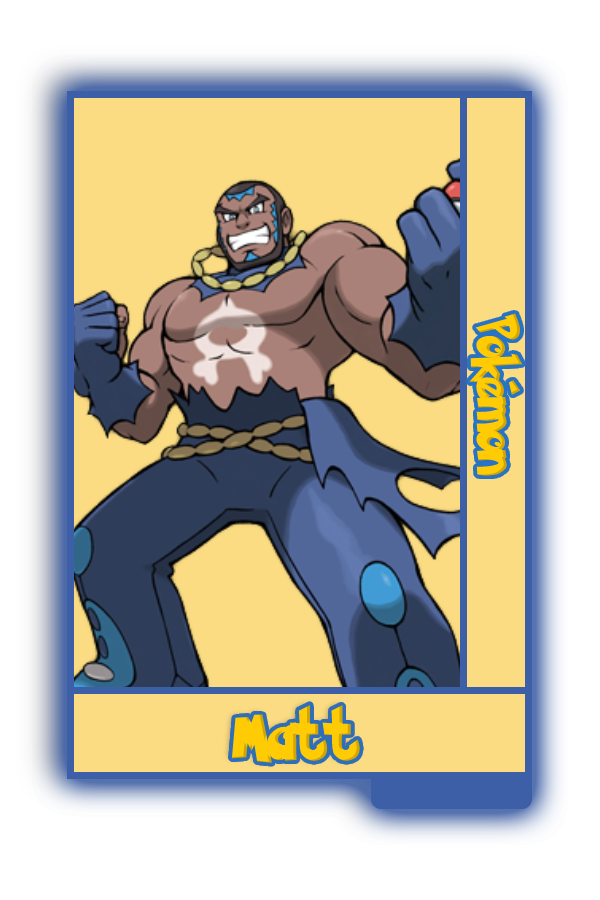
<style>
.page{position:relative;width:600px;height:900px;background:#fbdc83}
.page>*{position:absolute;margin:0}
.t1{font:48.8px "PokemonSolidNormal";color:#ffcb05;scale:0.8 1}
.t2{font:56.6px "PokemonSolidNormal";color:#ffcb05;scale:0.92 1}
</style>
<div class="page">
<p class="t1" style="left:469px;top:313px;width:54px;height:163px;rotate:90deg">Pokémon</p>
<p class="t2" style="left:231px;top:705px;width:129px;height:58px">Matt</p>
</div>
